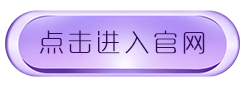
<style>
.page{position:relative;width:244px;height:87px;background:#ffffff}
.page>*{position:absolute;margin:0}
.t1{font:24.6px "MFYueHei_Noncommercial-ExLight";letter-spacing:0.12em;color:#330a5d;font-weight:bold}
</style>
<div class="page">
<p class="t1" style="left:40px;top:30px;width:165px;height:24px">点击进入官网</p>
</div>
